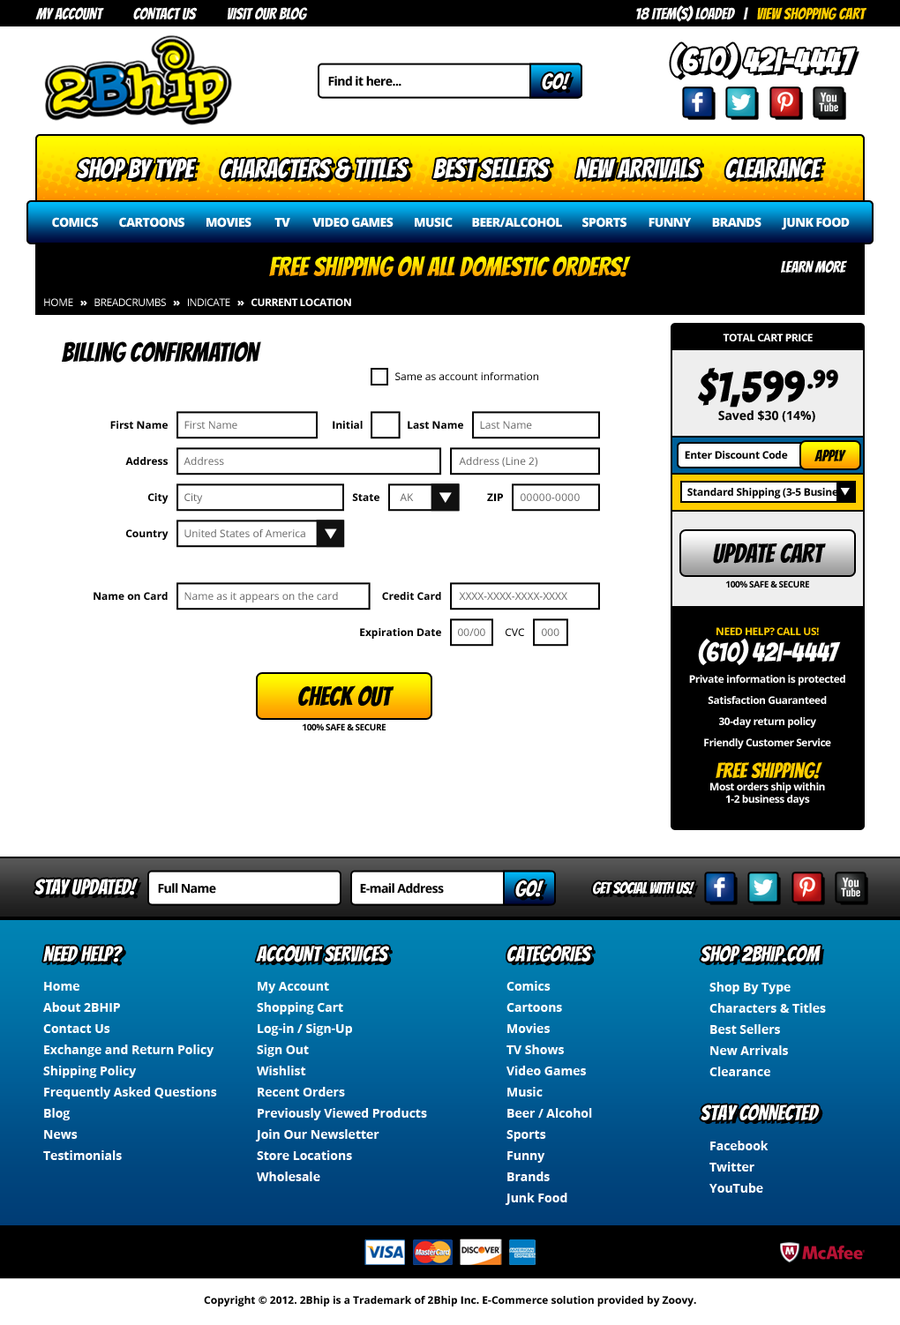
<style>
.page{position:relative;width:900px;height:1325px;background:#ffffff}
.page>*{position:absolute;margin:0}
.t1{font:15.9px "Bangers-Regular";color:#ffffff}
.t2{font:15.9px "Bangers-Regular";color:#ffcc00}
.t3{font:31.8px "Bangers-Regular";color:#ffffff;font-weight:bold}
.t4{font:12.4px "OpenSans-Bold";letter-spacing:-0.04em;color:#000000}
.t5{font:21.2px "Bangers-Regular";color:#ffffff}
.t6{font:26.5px "Bangers-Regular";color:#ffffff}
.t7{font:12.4px "OpenSans-Extrabold";letter-spacing:-0.04em;color:#ffffff}
.t8{font:26.5px "Bangers-Regular"}
.t9{font:10.6px "OpenSans-Bold";letter-spacing:-0.04em;color:#ffffff}
.t10{font:10.6px "OpenSans";letter-spacing:-0.04em;color:#ffffff}
.t11{font:10.6px "OpenSans-Extrabold";letter-spacing:-0.04em;color:#ffffff}
.t12{font:26.5px "Bangers-Regular";color:#000000}
.t13{font:10.6px "OpenSans";color:#000000}
.t14{font:12.4px/17.6px "OpenSans-Bold";color:#000000}
.t15{font:42.3px/24.7px "Bangers-Regular";letter-spacing:0.02em;color:#000000}
.t16{font:10.6px "OpenSans-Bold";color:#000000}
.t17{font:10.6px "OpenSans";color:#666666}
.t18{font:15.9px "Bangers-Regular";color:#000000}
.t19{font:10.6px "OpenSans-Bold";letter-spacing:-0.02em;color:#000000}
.t20{font:10.6px "OpenSans";letter-spacing:0.02em;color:#666666}
.t21{font:8.8px "OpenSans-Bold";letter-spacing:-0.04em;color:#010101;text-transform:uppercase}
.t22{font:10.6px/21.2px "OpenSans-Bold";letter-spacing:-0.04em;color:#ffffff}
.t23{font:10.6px/21.2px "OpenSans-Bold";letter-spacing:-0.04em;color:#ffcc00;text-transform:uppercase}
.t24{font:26.5px/26.5px "Bangers-Regular";color:#ffffff}
.t25{font:21.2px/31.8px "Bangers-Regular";color:#ffcc00}
.t26{font:10.6px/12.4px "OpenSans-Bold";letter-spacing:-0.04em;color:#ffffff}
.t27{font:15.9px "Bangers-Regular";letter-spacing:-0.025em;color:#ffffff}
.t28{font:12.4px/21.2px "OpenSans-Bold";color:#ffffff}
</style>
<div class="page">
<p class="t1" style="left:636px;top:5px;width:230px;height:17px">18 ITEM(S) LOADED   |   <span class="t2">VIEW SHOPPING CART</span></p>
<p class="t1" style="left:35px;top:7px;width:273px;height:13px">MY ACCOUNT          CONTACT US          VISIT OUR BLOG</p>
<p class="t3" style="left:670px;top:43px;width:186px;height:34px">(610) 42I-4447</p>
<p class="t4" style="left:328px;top:76px;width:73px;height:10px">Find it here...</p>
<p class="t5" style="left:542px;top:73px;width:29px;height:17px">GO!</p>
<p class="t6" style="left:77px;top:158px;width:120px;height:20px">SHOP BY TYPE</p>
<p class="t6" style="left:221px;top:158px;width:188px;height:21px">CHARACTERS &amp; TITLES</p>
<p class="t6" style="left:433px;top:158px;width:118px;height:20px">BEST SELLERS</p>
<p class="t6" style="left:575px;top:158px;width:125px;height:21px">NEW ARRIVALS</p>
<p class="t6" style="left:725px;top:158px;width:97px;height:20px">CLEARANCE</p>
<p class="t7" style="left:52px;top:217px;width:46px;height:11px">COMICS</p>
<p class="t7" style="left:119px;top:217px;width:65px;height:11px">CARTOONS</p>
<p class="t7" style="left:206px;top:217px;width:45px;height:11px">MOVIES</p>
<p class="t7" style="left:274px;top:218px;width:16px;height:9px">TV</p>
<p class="t7" style="left:312px;top:217px;width:81px;height:11px">VIDEO GAMES</p>
<p class="t7" style="left:415px;top:217px;width:38px;height:11px">MUSIC</p>
<p class="t7" style="left:472px;top:217px;width:90px;height:11px">BEER/ALCOHOL</p>
<p class="t7" style="left:582px;top:217px;width:44px;height:11px">SPORTS</p>
<p class="t7" style="left:648px;top:218px;width:44px;height:10px">FUNNY</p>
<p class="t7" style="left:712px;top:217px;width:49px;height:11px">BRANDS</p>
<p class="t7" style="left:782px;top:217px;width:68px;height:13px">JUNK FOOD</p>
<p class="t8" style="left:269px;top:256px;width:362px;height:21px">FREE SHIPPING ON ALL DOMESTIC ORDERS!</p>
<p class="t1" style="left:781px;top:260px;width:66px;height:13px">LEARN MORE</p>
<p class="t9" style="left:44px;top:298px;width:307px;height:8px"><span class="t10">HOME   </span><span class="t11">»</span><span class="t10">   BREADCRUMBS   </span><span class="t11">»</span><span class="t10">   INDICATE   </span><span class="t11">»   </span>CURRENT LOCATION</p>
<p class="t12" style="left:62px;top:341px;width:199px;height:22px">Billing Confirmation</p>
<p class="t9" style="left:723px;top:333px;width:90px;height:8px">TOTAL CART PRICE</p>
<p class="t13" style="left:395px;top:372px;width:143px;height:8px">Same as account information</p>
<p class="t14" style="left:698px;top:368px;width:140px;height:55px;text-align:center"><span class="t15">$1,599.99<br></span>Saved $30 (14%)</p>
<p class="t16" style="left:110px;top:421px;width:58px;height:8px">First Name</p>
<p class="t17" style="left:184px;top:421px;width:53px;height:8px">First Name</p>
<p class="t16" style="left:333px;top:421px;width:30px;height:8px">Initial</p>
<p class="t16" style="left:408px;top:421px;width:55px;height:8px">Last Name</p>
<p class="t17" style="left:480px;top:421px;width:52px;height:8px">Last Name</p>
<p class="t18" style="left:814px;top:449px;width:32px;height:12px">APPLY</p>
<p class="t16" style="left:125px;top:457px;width:43px;height:8px">Address</p>
<p class="t17" style="left:184px;top:457px;width:40px;height:8px">Address</p>
<p class="t17" style="left:459px;top:457px;width:78px;height:10px">Address (Line 2)</p>
<p class="t19" style="left:685px;top:451px;width:103px;height:8px">Enter Discount Code</p>
<p class="t16" style="left:148px;top:493px;width:21px;height:11px">City</p>
<p class="t17" style="left:184px;top:493px;width:19px;height:11px">City</p>
<p class="t16" style="left:352px;top:493px;width:27px;height:8px">State</p>
<p class="t17" style="left:400px;top:493px;width:14px;height:8px">AK</p>
<p class="t16" style="left:487px;top:493px;width:16px;height:8px">ZIP</p>
<p class="t20" style="left:521px;top:493px;width:59px;height:8px">00000-0000</p>
<p class="t19" style="left:687px;top:488px;width:188px;height:10px">Standard Shipping (3-5 Business Days</p>
<p class="t16" style="left:126px;top:529px;width:43px;height:11px">Country</p>
<p class="t17" style="left:184px;top:529px;width:121px;height:8px">United States of America</p>
<p class="t12" style="left:713px;top:543px;width:113px;height:21px">UPDATE CART</p>
<p class="t21" style="left:725px;top:581px;width:84px;height:7px">100% Safe &amp; Secure</p>
<p class="t16" style="left:94px;top:592px;width:74px;height:8px">Name on Card</p>
<p class="t17" style="left:184px;top:592px;width:154px;height:11px">Name as it appears on the card</p>
<p class="t16" style="left:382px;top:592px;width:59px;height:8px">Credit Card</p>
<p class="t17" style="left:459px;top:592px;width:108px;height:8px">XXXX-XXXX-XXXX-XXXX</p>
<p class="t16" style="left:360px;top:628px;width:81px;height:11px">Expiration Date</p>
<p class="t17" style="left:458px;top:628px;width:27px;height:8px">00/00</p>
<p class="t13" style="left:506px;top:628px;width:18px;height:8px">CVC</p>
<p class="t17" style="left:542px;top:628px;width:17px;height:8px">000</p>
<p class="t22" style="left:689px;top:627px;width:156px;height:178px;text-align:center"><span class="t23">Need Help? Call us!<br></span><span class="t24">(610) 42I-4447<br></span>Private information is protected<br>Satisfaction Guaranteed<br>30-day return policy<br>Friendly Customer Service<br><span class="t25">Free Shipping!<br></span><span class="t26">Most orders ship within<br>1-2 business days</span></p>
<p class="t12" style="left:298px;top:685px;width:96px;height:22px">CHECK OUT</p>
<p class="t21" style="left:302px;top:723px;width:84px;height:7px">100% Safe &amp; Secure</p>
<p class="t5" style="left:34px;top:879px;width:105px;height:16px">STAY UPDATED!</p>
<p class="t5" style="left:515px;top:880px;width:29px;height:17px">GO!</p>
<p class="t27" style="left:593px;top:881px;width:102px;height:14px">GET SOCIAL WITH US!</p>
<p class="t4" style="left:158px;top:883px;width:58px;height:11px">Full Name</p>
<p class="t4" style="left:360px;top:883px;width:84px;height:11px">E-mail Address</p>
<p class="t5" style="left:43px;top:946px;width:80px;height:17px">NEED HELP?</p>
<p class="t5" style="left:256px;top:946px;width:133px;height:17px">ACCOUNT SERVICES</p>
<p class="t5" style="left:507px;top:946px;width:85px;height:17px">CATEGORIES</p>
<p class="t5" style="left:700px;top:946px;width:120px;height:17px">SHOP 2BHIP.COM</p>
<p class="t28" style="left:43px;top:982px;width:174px;height:178px">Home<br>About 2BHIP<br>Contact Us<br>Exchange and Return Policy<br>Shipping Policy<br>Frequently Asked Questions<br>Blog<br>News<br>Testimonials</p>
<p class="t28" style="left:255px;top:982px;width:172px;height:199px">My Account<br>Shopping Cart<br>Log-in / Sign-Up<br>Sign Out<br>Wishlist<br>Recent Orders<br>Previously Viewed Products<br>Join Our Newsletter<br>Store Locations<br>Wholesale</p>
<p class="t28" style="left:505px;top:981px;width:87px;height:224px">Comics<br>Cartoons<br>Movies<br>TV Shows<br>Video Games<br>Music<br>Beer / Alcohol<br>Sports<br>Funny<br>Brands<br>Junk Food</p>
<p class="t28" style="left:709px;top:982px;width:117px;height:94px">Shop By Type<br>Characters &amp; Titles<br>Best Sellers<br>New Arrivals<br>Clearance</p>
<p class="t5" style="left:700px;top:1105px;width:120px;height:15px">STAY CONNECTED</p>
<p class="t28" style="left:709px;top:1141px;width:59px;height:52px">Facebook<br>Twitter<br>YouTube</p>
<p class="t16" style="left:204px;top:1296px;width:492px;height:11px">Copyright © 2012. 2Bhip is a Trademark of 2Bhip Inc. E-Commerce solution provided by Zoovy.</p>
</div>
